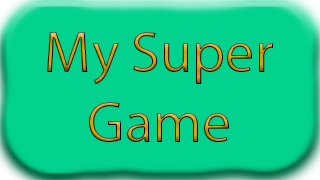
<style>
.page{position:relative;width:320px;height:180px;background:#02d28d}
.page>*{position:absolute;margin:0}
.t1{font:58.3px "MyriadPro-Regular"}
</style>
<div class="page">
<p class="t1" style="left:47px;top:32px;width:226px;height:110px;text-align:center">My Super<br>Game</p>
</div>
